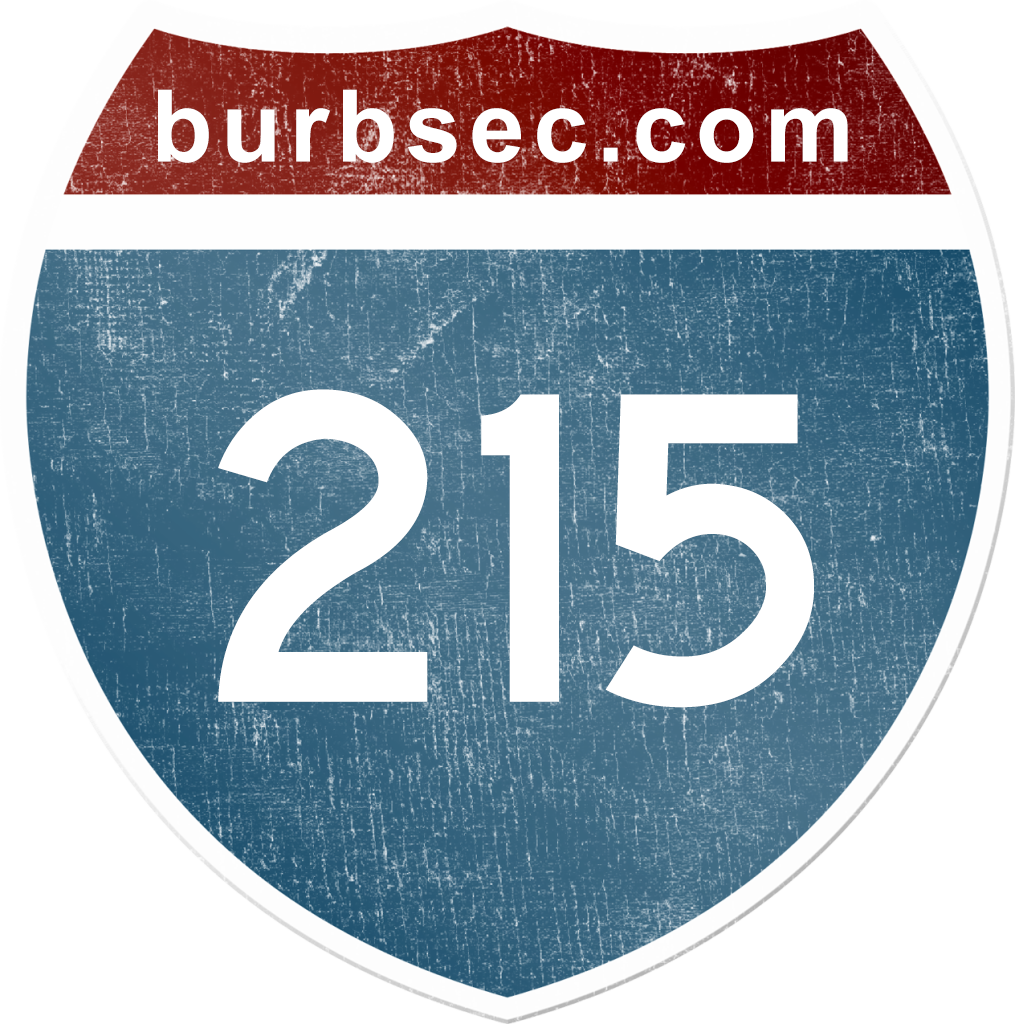
<style>
.page{position:relative;width:1015px;height:1024px;background:#ffffff}
.page>*{position:absolute;margin:0}
.t1{font:100px "Arial-BoldMT";letter-spacing:0.08em;color:#ffffff}
.t2{font:458.3px "HighwayGothic";letter-spacing:-0.02em;color:#ffffff}
</style>
<div class="page">
<p class="t1" style="left:158px;top:89px;width:690px;height:74px">burbsec.com</p>
<p class="t2" style="left:218px;top:389px;width:596px;height:319px">215</p>
</div>
